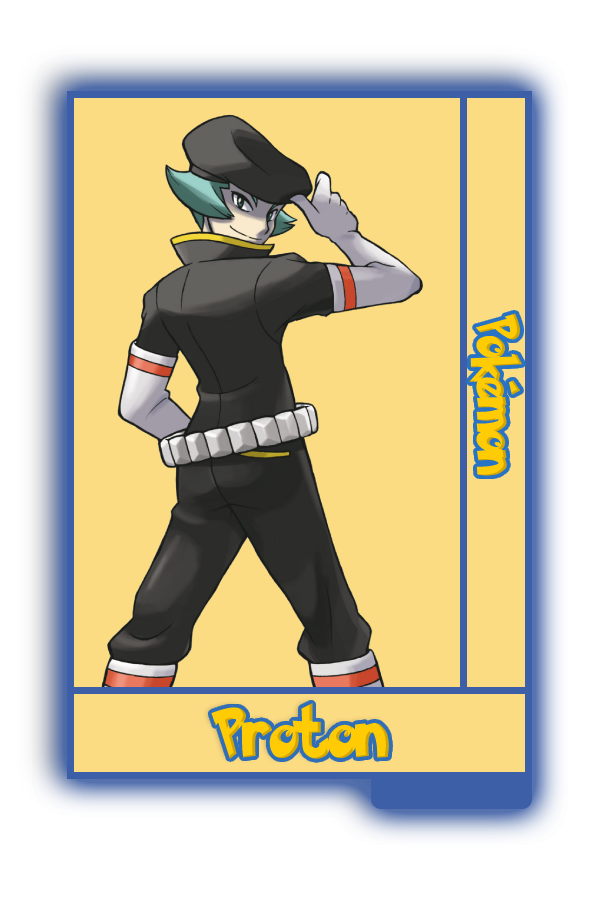
<style>
.page{position:relative;width:600px;height:900px;background:#fbdc83}
.page>*{position:absolute;margin:0}
.t1{font:48.8px "PokemonSolidNormal";color:#ffcb05;scale:0.8 1}
.t2{font:56.6px "PokemonSolidNormal";color:#ffcb05;scale:0.92 1}
</style>
<div class="page">
<p class="t1" style="left:469px;top:313px;width:54px;height:163px;rotate:90deg">Pokémon</p>
<p class="t2" style="left:211px;top:703px;width:178px;height:56px">Proton</p>
</div>
